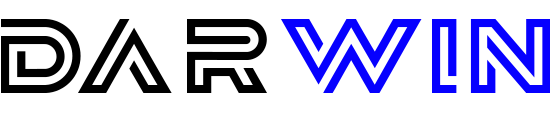
<style>
.page{position:relative;width:550px;height:113px;background:#ffffff}
.page>*{position:absolute;margin:0}
.t1{font:104.5px "Garde";color:#000000}
.t2{font:104.5px "Garde";color:#0600ff}
</style>
<div class="page">
<p class="t1" style="left:1px;top:19px;width:550px;height:74px">DAR<span class="t2">Win</span></p>
</div>
